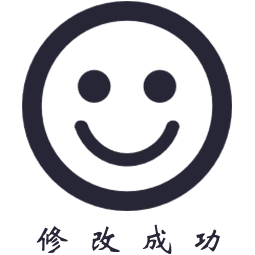
<style>
.page{position:relative;width:255px;height:255px;background:#ffffff}
.page>*{position:absolute;margin:0}
.t1{font:33.3px "STXinwei";letter-spacing:0.56em;color:#272636}
</style>
<div class="page">
<p class="t1" style="left:36px;top:224px;width:184px;height:30px">修改成功</p>
</div>
